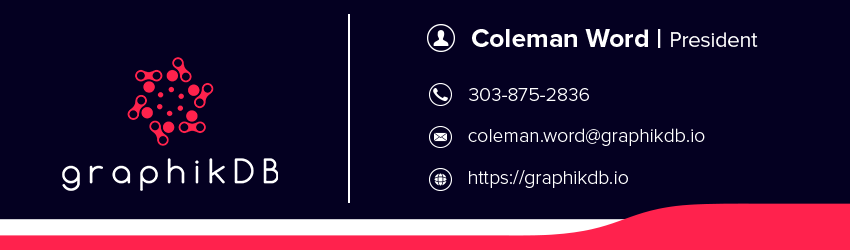
<style>
.page{position:relative;width:850px;height:250px;background:#040021}
.page>*{position:absolute;margin:0}
.t1{font:26.8px "ProximaNova-Bold";color:#ffffff}
.t2{font:21.4px "ProximaNova-Regular";color:#ffffff}
.t3{font:19.6px "ProximaNova-Light";color:#ffffff}
</style>
<div class="page">
<p class="t1" style="left:472px;top:29px;width:286px;height:19px">Coleman Word | <span class="t2">President</span></p>
<p class="t3" style="left:469px;top:88px;width:120px;height:13px">303-875-2836</p>
<p class="t3" style="left:468px;top:128px;width:237px;height:18px">coleman.word@graphikdb.io</p>
<p class="t3" style="left:469px;top:170px;width:159px;height:18px">https://graphikdb.io</p>
</div>
